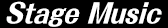
<style>
.page{position:relative;width:168px;height:28px;background:#000000}
.page>*{position:absolute;margin:0}
.t1{font:27.5px "FolkPro-Heavy";color:#ffffff;scale:0.87 1}
</style>
<div class="page">
<p class="t1" style="left:6px;top:1px;width:155px;height:26px">Stage Music</p>
<p class="t1" style="left:7px;top:1px;width:155px;height:26px">Stage Music</p>
</div>
